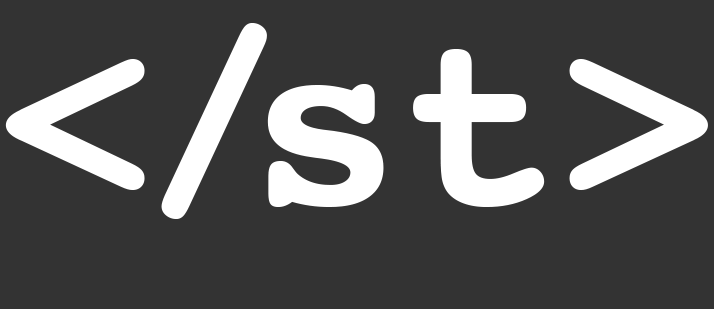
<style>
.page{position:relative;width:714px;height:309px;background:#333333}
.page>*{position:absolute;margin:0}
.t1{font:258.3px "Courier-Bold";color:#ffffff}
</style>
<div class="page">
<p class="t1" style="left:5px;top:23px;width:703px;height:196px">&lt;/st&gt;</p>
</div>
